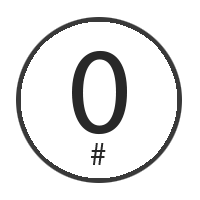
<style>
.page{position:relative;width:200px;height:200px;background:#ffffff}
.page>*{position:absolute;margin:0}
.t1{font:125px "MyriadPro-Regular";color:#282828}
.t2{font:33.3px "MyriadPro-Regular";color:#282828}
</style>
<div class="page">
<p class="t1" style="left:72px;top:50px;width:55px;height:85px">0</p>
<p class="t2" style="left:91px;top:143px;width:15px;height:22px">#</p>
</div>
